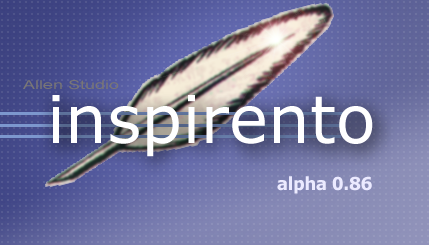
<style>
.page{position:relative;width:429px;height:245px}
.page>*{position:absolute;margin:0}
.t1{font:12px "ArialMT";color:#797676;scale:1.5 1}
.t2{font:66px "Verdana";color:#ffffff}
.t3{font:18px "Tahoma-Bold";color:#ebeaff}
</style>
<div class="page">
<p class="t1" style="left:23px;top:80px;width:96px;height:10px">Allen Studio</p>
<p class="t2" style="left:52px;top:95px;width:321px;height:62px">inspirento</p>
<p class="t3" style="left:277px;top:176px;width:95px;height:18px">alpha 0.86</p>
</div>
